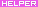
<style>
.page{position:relative;width:38px;height:7px;background:#eb59e9}
.page>*{position:absolute;margin:0}
.t1{font:8px "5x5-Pixel";color:#f8fff9}
</style>
<div class="page">
<p class="t1" style="left:2px;top:1px;width:34px;height:5px">helper</p>
</div>
